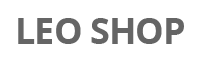
<style>
.page{position:relative;width:202px;height:61px;background:#ffffff}
.page>*{position:absolute;margin:0}
.t1{font:36px "OpenSans-Bold";letter-spacing:-0.025em;color:#656565;text-transform:uppercase}
</style>
<div class="page">
<p class="t1" style="left:18px;top:18px;width:166px;height:26px">LEO Shop</p>
</div>
